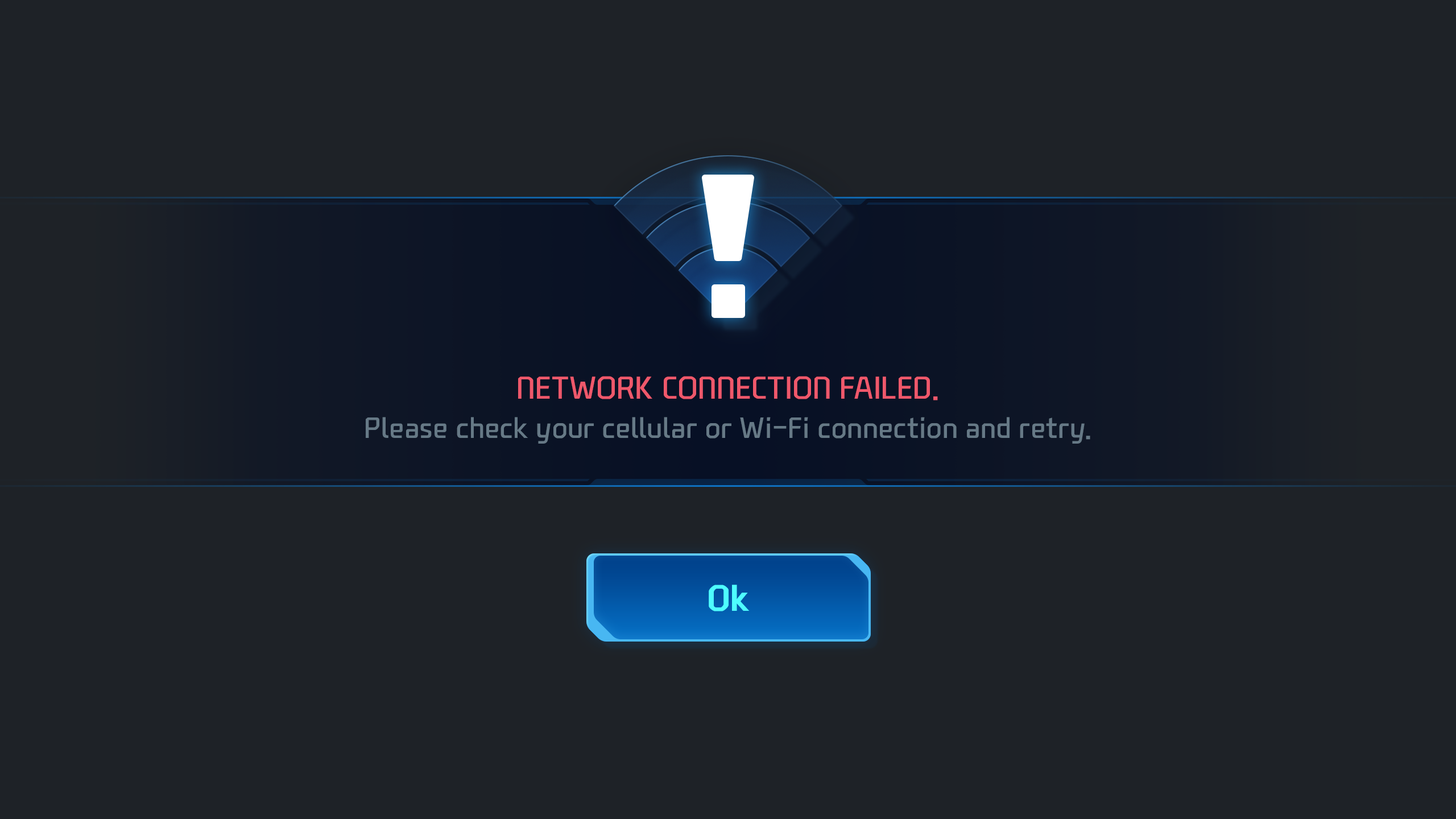
<style>
.page{position:relative;width:1456px;height:819px;background:#1e2227}
.page>*{position:absolute;margin:0}
.t1{font:30.7px "NEXONFootballGothicL";color:#ef586b;text-transform:uppercase}
.t2{font:28.4px "NEXONFootballGothicL";color:#667986}
.t3{font:35.3px "NEXONFootballGothicB";color:#4efefe}
</style>
<div class="page">
<p class="t1" style="left:518px;top:376px;width:420px;height:24px">Network connection failed.</p>
<p class="t2" style="left:366px;top:417px;width:724px;height:27px">Please check your cellular or Wi-Fi connection and retry.</p>
<p class="t3" style="left:709px;top:585px;width:41px;height:26px">Ok</p>
</div>
